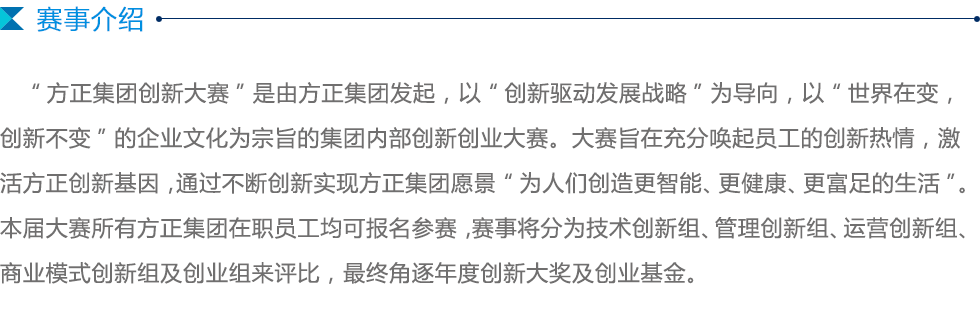
<style>
.page{position:relative;width:980px;height:331px;background:#ffffff}
.page>*{position:absolute;margin:0}
.t1{font:22px/45px "MicrosoftYaHei";letter-spacing:0.04em;color:#706f6f}
</style>
<div class="page">
<p class="t1" style="left:0px;top:82px;width:965px;height:202px">“方正集团创新大赛”是由方正集团发起，以“创新驱动发展战略”为导向，以“世界在变，创新不变”的企业文化为宗旨的集团内部创新创业大赛。大赛旨在充分唤起员工的创新热情，激活方正创新基因，通过不断创新实现方正集团愿景“为人们创造更智能、更健康、更富足的生活”。本届大赛所有方正集团在职员工均可报名参赛，赛事将分为技术创新组、管理创新组、运营创新组、商业模式创新组及创业组来评比，最终角逐年度创新大奖及创业基金。</p>
</div>
